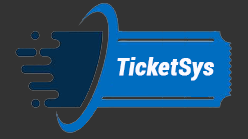
<style>
.page{position:relative;width:248px;height:139px;background:#333333}
.page>*{position:absolute;margin:0}
.t1{font:24px "Roboto-BoldCondensedItalic";color:#fafaff;font-weight:bold}
.t2{font:24px "Corbel";color:#fafaff;font-weight:bold}
</style>
<div class="page">
<p class="t1" style="left:117px;top:57px;width:97px;height:24px"><span class="t2">  </span>TicketSys</p>
</div>
